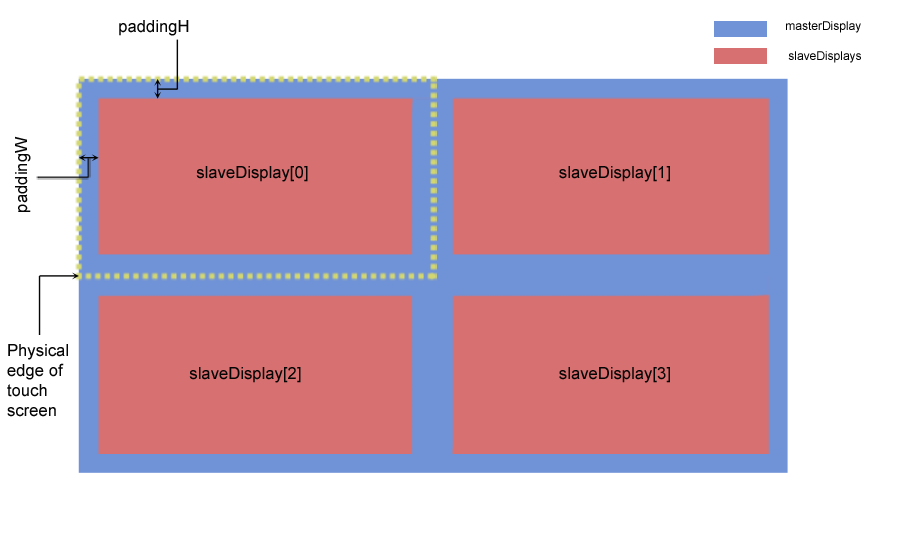
<style>
.page{position:relative;width:903px;height:556px;background:#ffffff}
.page>*{position:absolute;margin:0}
.t1{font:16.7px "ArialMT";color:#050505}
</style>
<div class="page">
<p class="t1" style="left:119px;top:20px;width:70px;height:16px">paddingH</p>
<p class="t1" style="left:15px;top:136px;width:16px;height:76px;rotate:-90deg">paddingW</p>
<p class="t1" style="left:196px;top:166px;width:112px;height:16px">slaveDisplay[0]</p>
<p class="t1" style="left:559px;top:166px;width:111px;height:16px">slaveDisplay[1]</p>
<p class="t1" style="left:7px;top:344px;width:61px;height:73px">Physical edge of touch screen</p>
<p class="t1" style="left:189px;top:367px;width:112px;height:16px">slaveDisplay[2]</p>
<p class="t1" style="left:559px;top:367px;width:111px;height:16px">slaveDisplay[3]</p>
</div>
